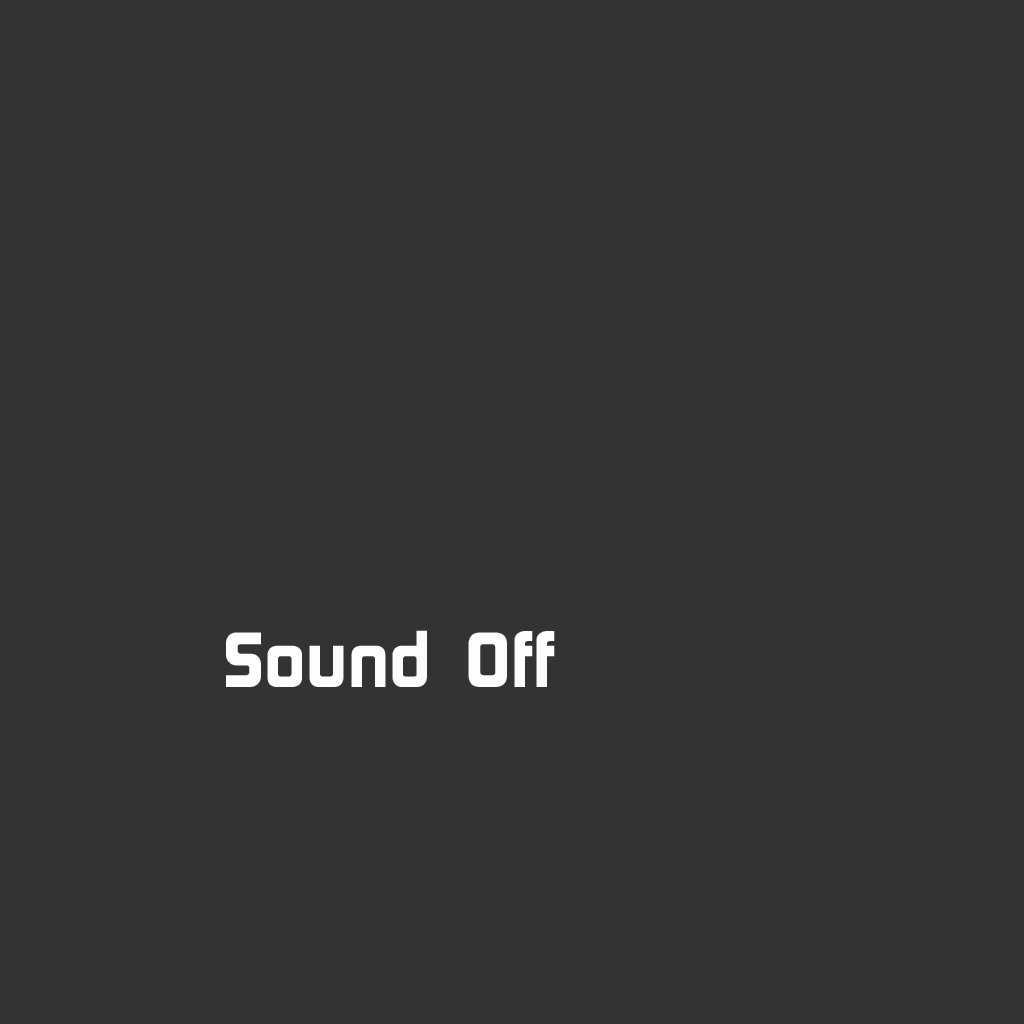
<style>
.page{position:relative;width:1024px;height:1024px;background:#333333}
.page>*{position:absolute;margin:0}
.t1{font:77.9px "ContinuumBold";color:#fdfdfd}
</style>
<div class="page">
<p class="t1" style="left:226px;top:630px;width:201px;height:57px">Sound</p>
<p class="t1" style="left:468px;top:631px;width:87px;height:56px">Off</p>
</div>
